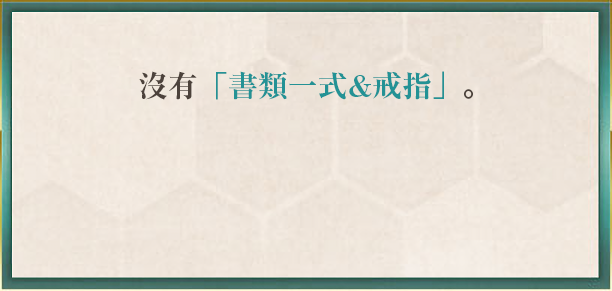
<style>
.page{position:relative;width:612px;height:291px}
.page>*{position:absolute;margin:0}
.t1{font:30px "RyuminPr6N-ExBold";color:#239295}
.t2{font:30px "RyuminPr6N-ExBold";color:#4c423b}
</style>
<div class="page">
<p class="t1" style="left:139px;top:71px;width:334px;height:29px"><span class="t2">沒有</span>「書類一式&amp;戒指」<span class="t2">。</span></p>
</div>
